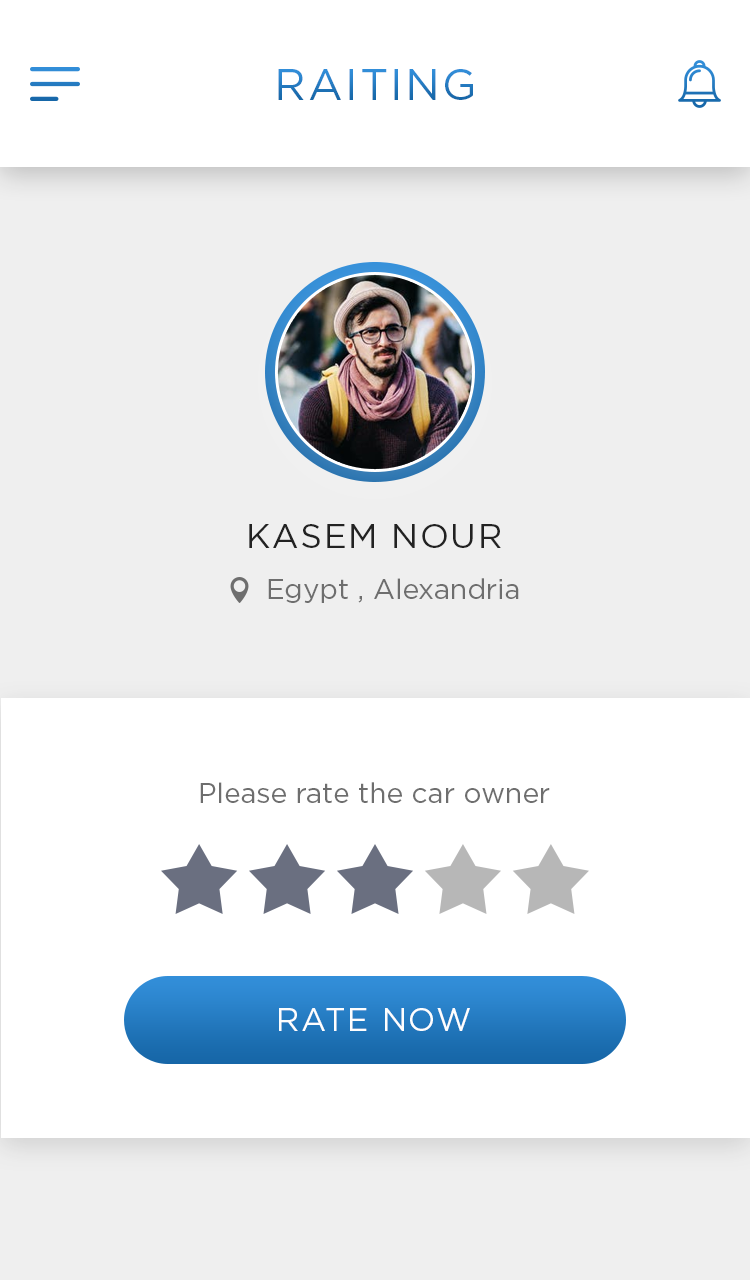
<style>
.page{position:relative;width:750px;height:1280px;background:#ffffff}
.page>*{position:absolute;margin:0}
.t1{font:44px "Gotham-Book";letter-spacing:0.05em;text-transform:uppercase}
.t2{font:34px "Gotham-Book";letter-spacing:0.05em;color:#222222;text-transform:uppercase}
.t3{font:28px "Gotham-Book";color:#6e6e6e}
.t4{font:32px "Gotham-Book";letter-spacing:0.05em;color:#fefefe;text-transform:uppercase}
</style>
<div class="page">
<p class="t1" style="left:278px;top:69px;width:195px;height:31px">Raiting</p>
<p class="t2" style="left:249px;top:524px;width:252px;height:24px">KASEM NOUR</p>
<p class="t3" style="left:268px;top:578px;width:251px;height:25px">Egypt , Alexandria</p>
<p class="t3" style="left:200px;top:782px;width:350px;height:21px">Please rate the car owner</p>
<p class="t4" style="left:279px;top:1008px;width:191px;height:23px">RATE NOW</p>
</div>
